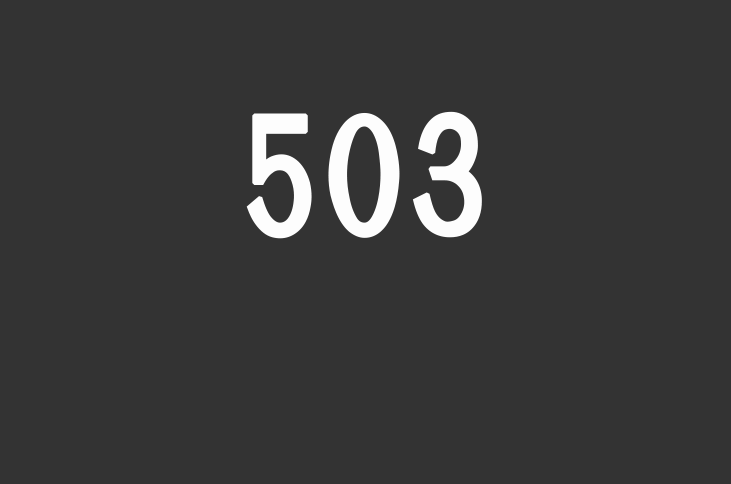
<style>
.page{position:relative;width:731px;height:484px;background:#333333}
.page>*{position:absolute;margin:0}
.t1{font:144px "HGSSoeiPresenceEB";color:#fdfdfd;font-weight:bold}
</style>
<div class="page">
<p class="t1" style="left:246px;top:111px;width:236px;height:128px">503</p>
</div>
